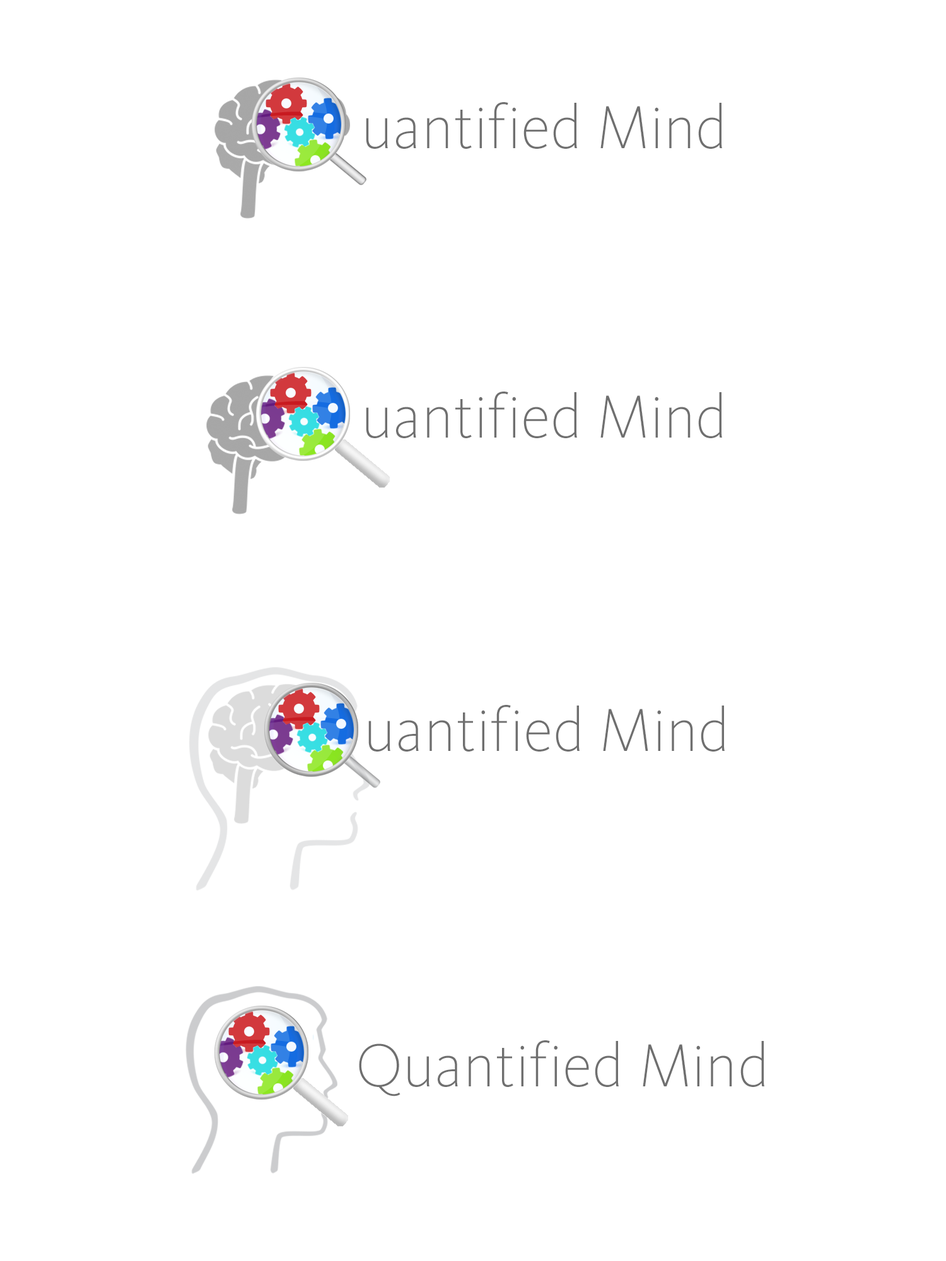
<style>
.page{position:relative;width:946px;height:1261px;background:#ffffff}
.page>*{position:absolute;margin:0}
.t1{font:63px "KievitOT-ExtraLight";color:#6f6f6f}
</style>
<div class="page">
<p class="t1" style="left:366px;top:102px;width:356px;height:47px">uantif ied Mind</p>
<p class="t1" style="left:366px;top:392px;width:356px;height:46px">uantif ied Mind</p>
<p class="t1" style="left:368px;top:705px;width:356px;height:47px">uantif ied Mind</p>
<p class="t1" style="left:359px;top:1040px;width:405px;height:56px">Quantif ied Mind</p>
</div>
